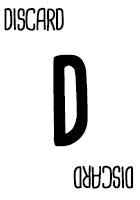
<style>
.page{position:relative;width:140px;height:200px;background:#ffffff}
.page>*{position:absolute;margin:0}
.t1{font:28.7px "CardenioModern-Reg";letter-spacing:-0.05em;color:#000000;text-transform:uppercase;font-weight:bold;scale:0.87 1}
.t2{font:115px "CardenioModern-Bold";letter-spacing:-0.1em;color:#000000;text-transform:uppercase;font-weight:bold;scale:0.87 1}
</style>
<div class="page">
<p class="t1" style="left:4px;top:7px;width:60px;height:24px">discard</p>
<p class="t2" style="left:53px;top:54px;width:35px;height:93px">D</p>
<p class="t1" style="left:73px;top:165px;width:61px;height:24px;rotate:180deg">discard</p>
</div>
